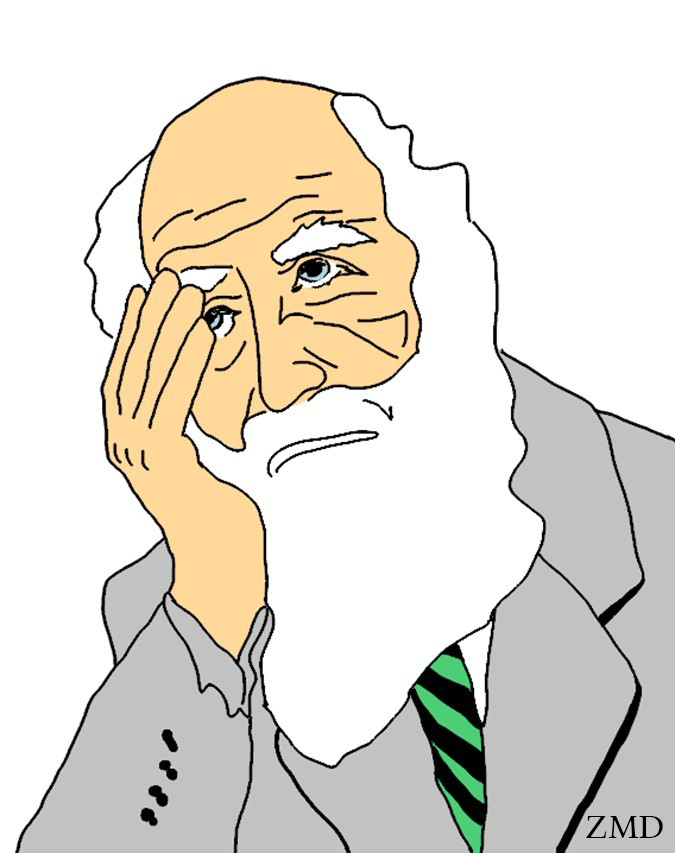
<style>
.page{position:relative;width:675px;height:853px;background:#ffffff}
.page>*{position:absolute;margin:0}
.t1{font:33.3px "ETBembo-RomanOSF";color:#000000}
</style>
<div class="page">
<p class="t1" style="left:586px;top:816px;width:77px;height:22px">ZMD</p>
</div>
